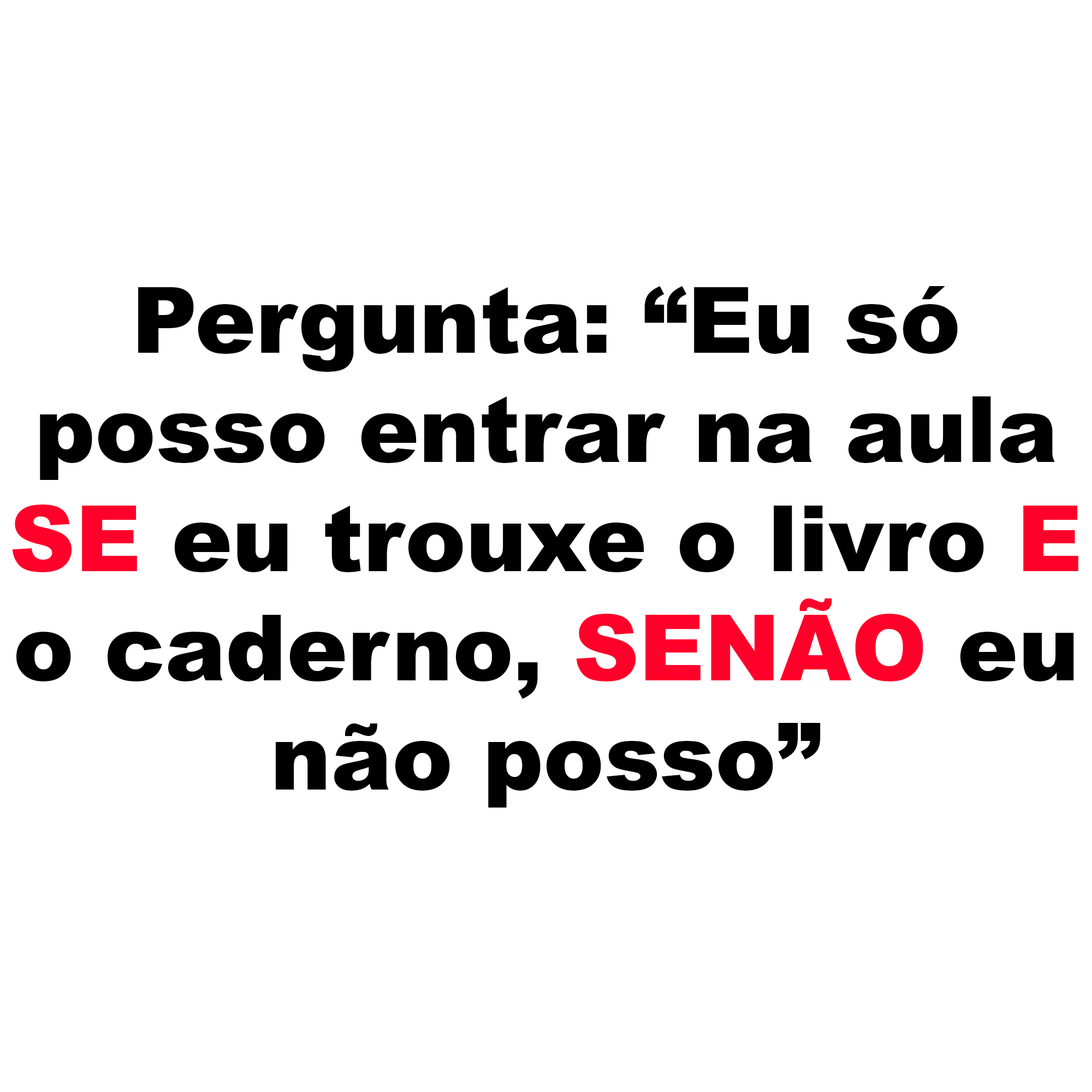
<style>
.page{position:relative;width:1092px;height:1092px;background:#ffffff}
.page>*{position:absolute;margin:0}
.t1{font:91px "Arial-Black";color:#000000}
.t2{font:91px "Arial-Black";color:#ff002a}
</style>
<div class="page">
<p class="t1" style="left:12px;top:286px;width:1066px;height:522px;text-align:center">Pergunta: “Eu só<br>posso entrar na aula<br><span class="t2">SE</span> eu trouxe o livro <span class="t2">E<br></span>o caderno, <span class="t2">SENÃO</span> eu<br>não posso”</p>
</div>
